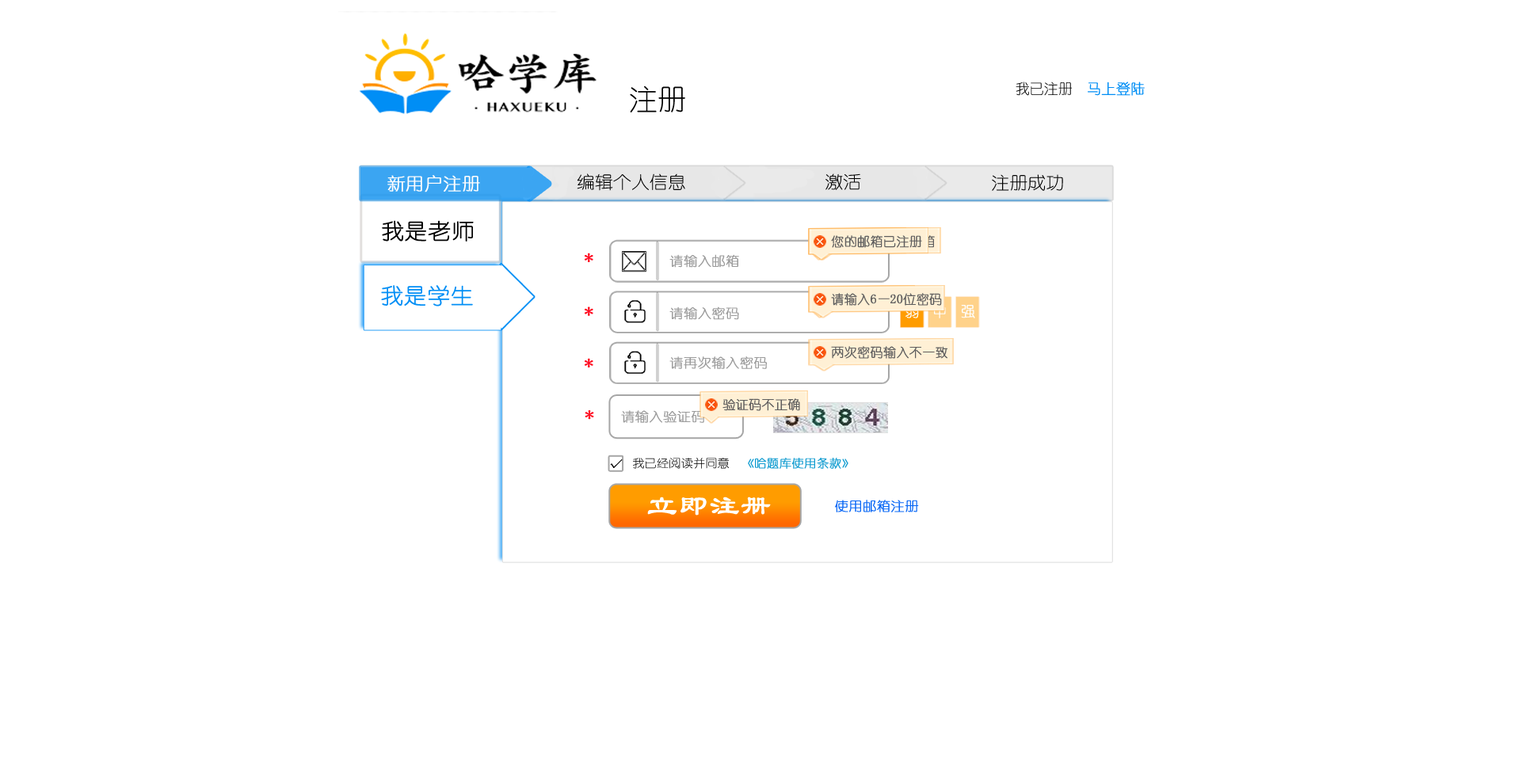
<style>
.page{position:relative;width:1521px;height:784px;background:#ffffff}
.page>*{position:absolute;margin:0}
.t1{font:28.5px "YouYuan";color:#000000}
.t2{font:14.3px "YouYuan";color:#000000}
.t3{font:14.3px "YouYuan";color:#008ef5;font-weight:bold}
.t4{font:17.2px "YouYuan";color:#000000;scale:1.06 1}
.t5{font:17.2px "YouYuan";color:#fffdfd;font-weight:bold;scale:1.06 1}
.t6{font:21.5px "YouYuan";color:#000000;font-weight:bold;scale:1.06 1}
.t7{font:12.7px "YouYuan";color:#5e5e5e;font-weight:bold}
.t8{font:17.2px "YouYuan";color:#ff051d;font-weight:bold;scale:1.06 1}
.t9{font:12.9px "YouYuan";color:#9b9b9b;font-weight:bold;scale:1.06 1}
.t10{font:21.5px "YouYuan";color:#008ef5;font-weight:bold;scale:1.06 1}
.t11{font:12.7px "YouYuan";font-weight:bold}
.t12{font:14.3px "YouYuan";color:#ffffff;font-weight:bold}
.t13{font:14.3px "YouYuan";color:#fff0d5;font-weight:bold}
.t14{font:11.5px "YouYuan";color:#000000;font-weight:bold;scale:1.06 1}
.t15{font:11.5px "YouYuan";color:#119cd0;font-weight:bold;scale:1.06 1}
.t16{font:11.5px "YouYuan";color:#000000;scale:1.06 1}
.t17{font:28.7px "LiSu";color:#ffffff;font-weight:bold;scale:1.06 1}
.t18{font:12.9px "YouYuan";color:#0a68f5;font-weight:bold;scale:1.06 1}
</style>
<div class="page">
<p class="t1" style="left:630px;top:86px;width:55px;height:26px">注册</p>
<p class="t2" style="left:1015px;top:82px;width:130px;height:14px">我已注册  <span class="t3">马上登陆</span></p>
<p class="t4" style="left:577px;top:173px;width:108px;height:18px">编辑个人信息</p>
<p class="t4" style="left:825px;top:173px;width:36px;height:17px">激活</p>
<p class="t5" style="left:387px;top:175px;width:93px;height:17px">新用户注册</p>
<p class="t4" style="left:992px;top:174px;width:71px;height:17px">注册成功</p>
<p class="t6" style="left:382px;top:220px;width:92px;height:22px">我是老师</p>
<p class="t7" style="left:831px;top:235px;width:91px;height:13px">您的邮箱已注册</p>
<p class="t8" style="left:585px;top:253px;width:8px;height:9px">*</p>
<p class="t9" style="left:669px;top:254px;width:70px;height:14px">请输入邮箱</p>
<p class="t10" style="left:381px;top:285px;width:92px;height:22px">我是学生</p>
<p class="t11" style="left:831px;top:293px;width:65px;height:13px">请输入密码</p>
<p class="t7" style="left:831px;top:293px;width:111px;height:13px">请输入6—20位密码</p>
<p class="t12" style="left:905px;top:305px;width:14px;height:13px">弱</p>
<p class="t13" style="left:934px;top:304px;width:12px;height:14px">中</p>
<p class="t12" style="left:961px;top:305px;width:14px;height:13px">强</p>
<p class="t8" style="left:585px;top:307px;width:8px;height:9px">*</p>
<p class="t9" style="left:669px;top:307px;width:70px;height:13px">请输入密码</p>
<p class="t7" style="left:831px;top:346px;width:116px;height:13px">两次密码输入不一致</p>
<p class="t8" style="left:585px;top:358px;width:8px;height:10px">*</p>
<p class="t9" style="left:669px;top:356px;width:98px;height:13px">请再次输入密码</p>
<p class="t7" style="left:722px;top:398px;width:78px;height:13px">验证码不正确</p>
<p class="t8" style="left:585px;top:410px;width:9px;height:10px">*</p>
<p class="t9" style="left:621px;top:410px;width:83px;height:13px">请输入验证码</p>
<p class="t14" style="left:610px;top:459px;width:13px;height:9px">√</p>
<p class="t15" style="left:633px;top:457px;width:215px;height:12px"><span class="t16">我已经阅读并同意  </span>《哈题库使用条款》</p>
<p class="t17" style="left:647px;top:497px;width:124px;height:19px">立即注册</p>
<p class="t18" style="left:835px;top:500px;width:84px;height:12px">使用邮箱注册</p>
</div>
